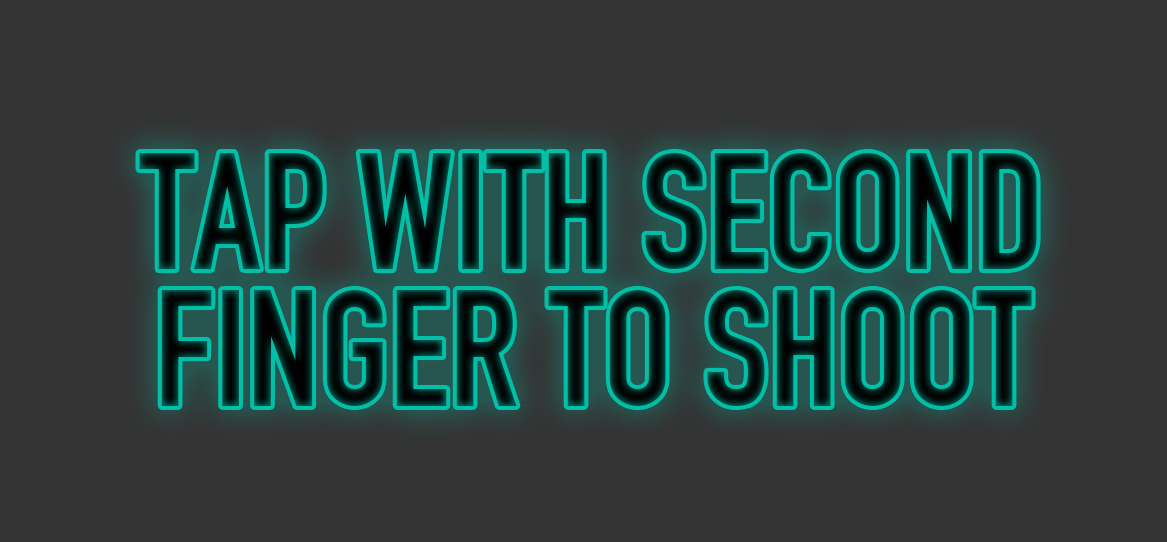
<style>
.page{position:relative;width:1167px;height:542px;background:#333333}
.page>*{position:absolute;margin:0}
.t1{font:162.9px/137.5px "DINEngschrift";text-transform:uppercase}
</style>
<div class="page">
<p class="t1" style="left:139px;top:152px;width:898px;height:254px;text-align:center">Tap with second<br>finger to shoot</p>
</div>
